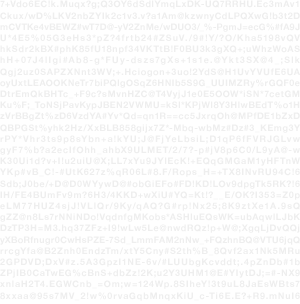
<style>
.page{position:relative;width:300px;height:304px;background:#ffffff}
.page>*{position:absolute;margin:0}
.t1{font:9px/4px "HelveticaNeue-Bold";color:#eeeeee}
</style>
<div class="page">
<p class="t1" style="left:0px;top:0px;width:301px;height:301px;text-align:justify">7+Vdo6EC!k.Muqx?g;Q3OY6dSdlYmqLxDK-UQ7RRHU.Ec3mAv1<br>Ckux/wD%LKV2nbZYIk2c1v3.v?a1Am@kzwnyCdLPQXwG!b3t2D<br>mCVTKe4vBEWZ#wT7D@-yV2ZnMe/wDUO3/_%-PgmJ=ecG%#fA9J<br>U*4E5%05G3eHs3*pZ?4frtb24#ZSuV./9#!Y/?O/Kha5198vQV<br>hkSdr2kBX#phK85fU18npf34VKTtB!F0BU3k3gXQ+;uWhzWoAS<br>hH+07J4lIgi#Ab8-g*FUy-dszs7gXs+1s1e.@Ykt3SX@4_;Slk<br>Qgj2uz0SAPZXNnt3WV;+.Hciogon+3uo!2YdS@H1UvYVUfE6UA<br>oyUxtLEAOOKNeTr7biPQlgOSqZ6HNIb5S9G_UUIMZRy%rGQF0e<br>DtrEmQkBHTc_+F9c?sMvnHZC@T4VyjJ1e0E5OOW*iSN*7cetGM<br>Ku%F;_ToNSjPavKypJBEN2VWMU=kSl*KPjWl8Y3HlwBEdT%o1H<br>zVrBBgZt%zD6VzdYA#Yv*Qd=qn1R==cc5JxrqOh@MPfDE1bZxD<br>QBPGSt%yhk2Hz/XxBLB858gijx7Z*-Mbq-wbMz#Dz#3_KEmg3Y<br>rPY*Vhr3ts9p8sYbn+a!kYU;J@FjYeLbsiL;D1qP6fFVRJGLvw<br>gyF7%b?a2ecIfOhh_ahbX9ULMET/2/7?-p#jV8p6C0/L9yA@-w<br>K30Ui1d?v+I!u2uiU@X;LL7xYu9JYlEcK!+EQqGMGaM1yHFTnW<br>YKp#vB_C!-#UtK627z%qR06L#8.F/Rops_H=+TX8INvRU94C!6<br>Sdb;J0be/+D@D0WYywD@#obGiEFo#FD!KD!LOv9dpgTk5RK?!6<br>IH/FE4BUmFv9m?6H3/4KKD+wXiU#YQ=Kt!?__E/OK?I353=Z0p<br>eLM77HUZ4sjJ!VLlQr/9Ky/qAQ?G#rp!Nx25;8K9ztXe1A.9sQ<br>gZZ@n8Ls7rNNiNDo!VqdnfgMKobs*ASHluEQsWK=ubAqwlLJbK<br>DzTP3H=M3.hq37ZFz+I9!wLw5Le@nwdRQz!p+W@;XgqLjDvQQj<br>yXBoRfnugr0CwHsPZE-7Sd_LmmFAM2nNw_+FQzhnBQ@VTU6jqQ<br>rrcgYfa@B2Znh0EndzTm/xtY5Cny#S2th%B_8Qvf2ax1Nk5MRu<br>2GPDVD;DxV#z.5A3GpzI1NE-6v/#LUUbgKcvddt;.4pZnDb#1b<br>ZPjIB0CaTwEG%cBnS+dbZz!2K;u2Y3UHM1@E#YIytDJ;=#-NX9<br>xnlaH2T4.EGWCnb_=Om;w=124Wp.8SIheY!3t9uL8JaEsWBts7<br>8xxaa@95s7MV_2!w%0rvaGqbMnqxKiU_c-Ti6E.E?+R9.mNuI6<br>ZXB;t#GVO9XLvKmP=Hik*+1m0m*4cwZ_oND;?eScbl*L45OHWw<br>lGLuHqtlTGCY%okauhGpUl-GJa.p5!Y4itDT8?GjafLLZCsYyY<br>J3A3lHREl3sD3Y5U@WkRpzbuO*a04G5w#b7r41I_B3ga@Xz+cD<br>JV+h-icdow3oXe;!McoNnMOoP8TA3#MnXz?j9gmYPbMiPjfBc5<br>IWWPo/HVRCObwwjQRvjlJ2@P.L/2Y2dSu94*RIK!cnPjJ+1n/8</p>
</div>
